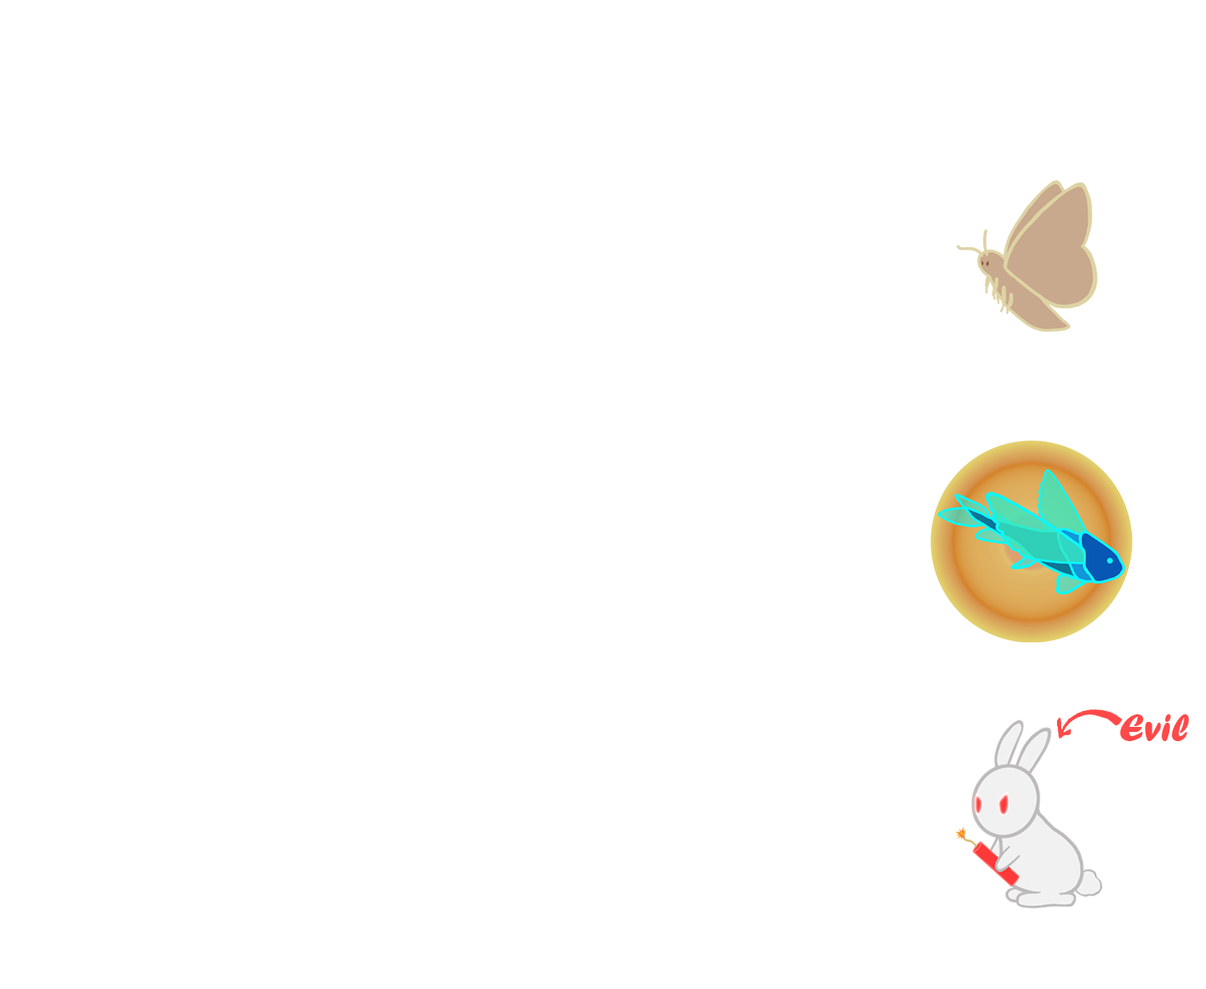
<style>
.page{position:relative;width:1206px;height:989px;background:#ffffff}
.page>*{position:absolute;margin:0}
.t1{font:40px "ForteMT";color:#ff4949}
</style>
<div class="page">
<p class="t1" style="left:1120px;top:714px;width:69px;height:27px">Evil</p>
</div>
